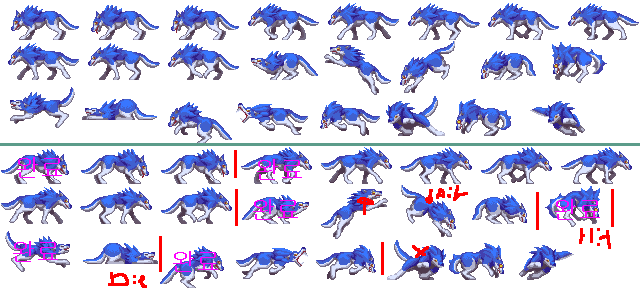
<style>
.page{position:relative;width:640px;height:288px;background:#ffffff}
.page>*{position:absolute;margin:0}
.t1{font:24px "Gulim";color:#ff00ff}
</style>
<div class="page">
<p class="t1" style="left:17px;top:157px;width:45px;height:21px">완료</p>
<p class="t1" style="left:257px;top:159px;width:45px;height:21px">완료</p>
<p class="t1" style="left:253px;top:199px;width:45px;height:21px">완료</p>
<p class="t1" style="left:555px;top:199px;width:45px;height:21px">완료</p>
<p class="t1" style="left:13px;top:241px;width:45px;height:21px">완료</p>
<p class="t1" style="left:173px;top:251px;width:45px;height:21px">완료</p>
</div>
